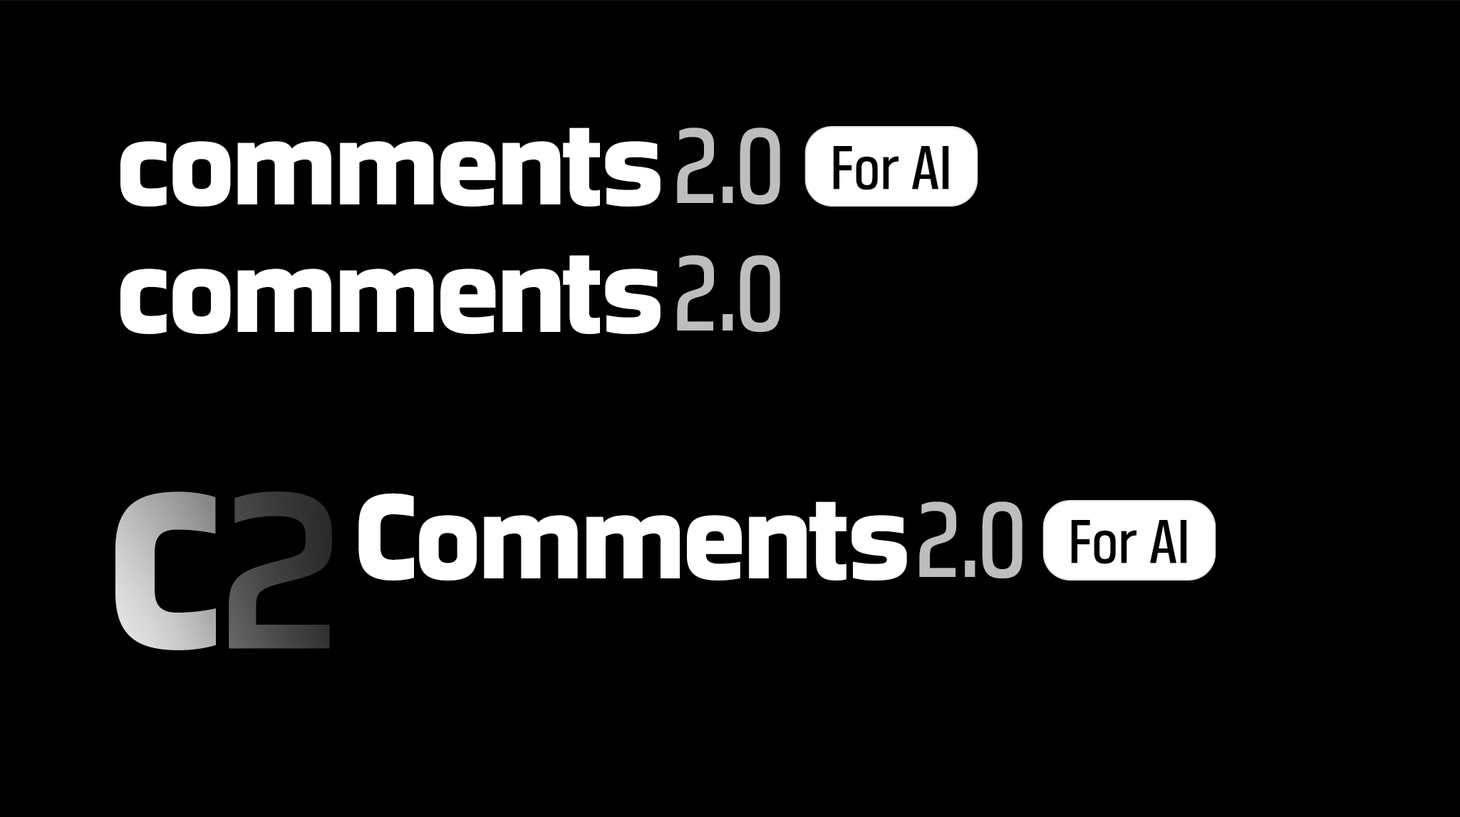
<style>
.page{position:relative;width:1460px;height:817px;background:#000000}
.page>*{position:absolute;margin:0}
.t1{font:116.3px "GreatEscapeBl-Regular";letter-spacing:-0.04em;color:#ffffff}
.t2{font:116.3px "GreatEscapeBl-Regular";color:#ffffff}
.t3{font:103.9px "GreatEscapeNarrowBk-Regular";color:#bebebe}
.t4{font:60.3px "GreatEscapeNarrowBk-Regular";color:#000000}
.t5{font:212px "GreatEscapeBl-Regular";letter-spacing:-0.04em}
.t6{font:215.3px "GreatEscapeRg-Regular";letter-spacing:-0.04em;color:#3f3f3f}
</style>
<div class="page">
<p class="t1" style="left:120px;top:128px;width:540px;height:79px">commen<span class="t2">ts</span></p>
<p class="t3" style="left:677px;top:128px;width:103px;height:76px">2.0</p>
<p class="t4" style="left:833px;top:146px;width:116px;height:44px">For AI</p>
<p class="t1" style="left:120px;top:255px;width:540px;height:79px">commen<span class="t2">ts</span></p>
<p class="t3" style="left:677px;top:255px;width:103px;height:77px">2.0</p>
<p class="t5" style="left:115px;top:491px;width:101px;height:159px">C</p>
<p class="t6" style="left:229px;top:491px;width:103px;height:158px">2</p>
<p class="t1" style="left:358px;top:493px;width:549px;height:88px">Commen<span class="t2">ts</span></p>
<p class="t3" style="left:919px;top:501px;width:103px;height:77px">2.0</p>
<p class="t4" style="left:1071px;top:520px;width:116px;height:44px">For AI</p>
</div>
